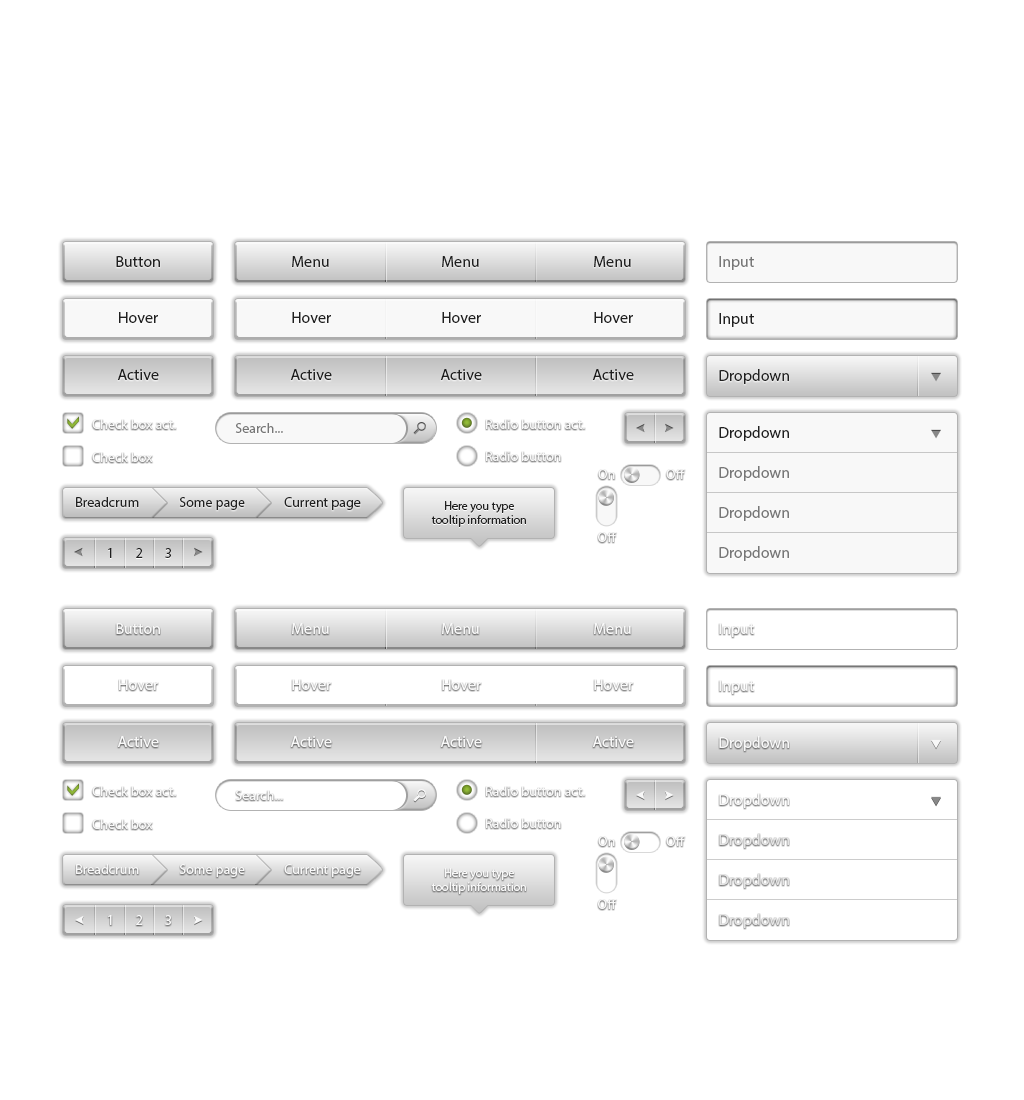
<style>
.page{position:relative;width:1024px;height:1100px;background:#ffffff}
.page>*{position:absolute;margin:0}
.t1{font:16px "MyriadPro-Regular";color:#202020}
.t2{font:16px "MyriadPro-Regular";color:#777777}
.t3{font:14px "MyriadPro-Regular";color:#777777}
.t4{font:14px "MyriadPro-Regular";color:#f8f8f8}
.t5{font:14px "MyriadPro-Regular";color:#202020}
.t6{font:12px "MyriadPro-Regular";color:#202020}
.t7{font:16px "MyriadPro-Regular";color:#f8f8f8}
.t8{font:12px "MyriadPro-Regular";color:#f8f8f8}
</style>
<div class="page">
<p class="t1" style="left:116px;top:256px;width:44px;height:11px">Button</p>
<p class="t1" style="left:292px;top:256px;width:37px;height:11px">Menu</p>
<p class="t1" style="left:442px;top:256px;width:37px;height:11px">Menu</p>
<p class="t1" style="left:594px;top:256px;width:37px;height:11px">Menu</p>
<p class="t2" style="left:719px;top:256px;width:35px;height:14px">Input</p>
<p class="t1" style="left:119px;top:312px;width:39px;height:11px">Hover</p>
<p class="t1" style="left:292px;top:312px;width:39px;height:11px">Hover</p>
<p class="t1" style="left:442px;top:312px;width:39px;height:11px">Hover</p>
<p class="t1" style="left:594px;top:312px;width:39px;height:11px">Hover</p>
<p class="t1" style="left:719px;top:313px;width:35px;height:14px">Input</p>
<p class="t1" style="left:117px;top:369px;width:42px;height:11px">Active</p>
<p class="t1" style="left:290px;top:369px;width:42px;height:11px">Active</p>
<p class="t1" style="left:440px;top:369px;width:42px;height:11px">Active</p>
<p class="t1" style="left:592px;top:369px;width:42px;height:11px">Active</p>
<p class="t1" style="left:719px;top:369px;width:70px;height:15px">Dropdown</p>
<p class="t3" style="left:235px;top:423px;width:48px;height:10px">Search...</p>
<p class="t1" style="left:719px;top:426px;width:70px;height:15px">Dropdown</p>
<p class="t4" style="left:666px;top:469px;width:19px;height:10px">Off</p>
<p class="t2" style="left:719px;top:466px;width:70px;height:15px">Dropdown</p>
<p class="t5" style="left:76px;top:497px;width:63px;height:10px">Breadcrum</p>
<p class="t5" style="left:179px;top:497px;width:66px;height:13px">Some page</p>
<p class="t5" style="left:284px;top:497px;width:77px;height:13px">Current page</p>
<p class="t6" style="left:431px;top:501px;width:95px;height:26px;text-align:center">Here you type<br> tooltip information</p>
<p class="t2" style="left:719px;top:506px;width:70px;height:15px">Dropdown</p>
<p class="t4" style="left:598px;top:532px;width:19px;height:10px">Off</p>
<p class="t5" style="left:108px;top:548px;width:4px;height:10px">1</p>
<p class="t5" style="left:136px;top:548px;width:7px;height:10px">2</p>
<p class="t5" style="left:165px;top:548px;width:6px;height:10px">3</p>
<p class="t2" style="left:719px;top:546px;width:70px;height:15px">Dropdown</p>
<p class="t7" style="left:116px;top:623px;width:44px;height:11px">Button</p>
<p class="t7" style="left:292px;top:623px;width:37px;height:11px">Menu</p>
<p class="t7" style="left:442px;top:623px;width:37px;height:11px">Menu</p>
<p class="t7" style="left:594px;top:623px;width:37px;height:11px">Menu</p>
<p class="t7" style="left:117px;top:736px;width:42px;height:11px">Active</p>
<p class="t7" style="left:290px;top:736px;width:42px;height:11px">Active</p>
<p class="t7" style="left:440px;top:736px;width:42px;height:11px">Active</p>
<p class="t7" style="left:592px;top:736px;width:42px;height:11px">Active</p>
<p class="t7" style="left:719px;top:736px;width:70px;height:15px">Dropdown</p>
<p class="t4" style="left:666px;top:836px;width:19px;height:10px">Off</p>
<p class="t4" style="left:76px;top:864px;width:63px;height:10px">Breadcrum</p>
<p class="t4" style="left:179px;top:864px;width:66px;height:13px">Some page</p>
<p class="t4" style="left:284px;top:864px;width:77px;height:13px">Current page</p>
<p class="t8" style="left:431px;top:868px;width:95px;height:26px;text-align:center">Here you type<br> tooltip information</p>
<p class="t4" style="left:598px;top:899px;width:19px;height:10px">Off</p>
<p class="t4" style="left:108px;top:915px;width:4px;height:10px">1</p>
<p class="t4" style="left:136px;top:915px;width:7px;height:10px">2</p>
<p class="t4" style="left:165px;top:915px;width:6px;height:10px">3</p>
</div>
